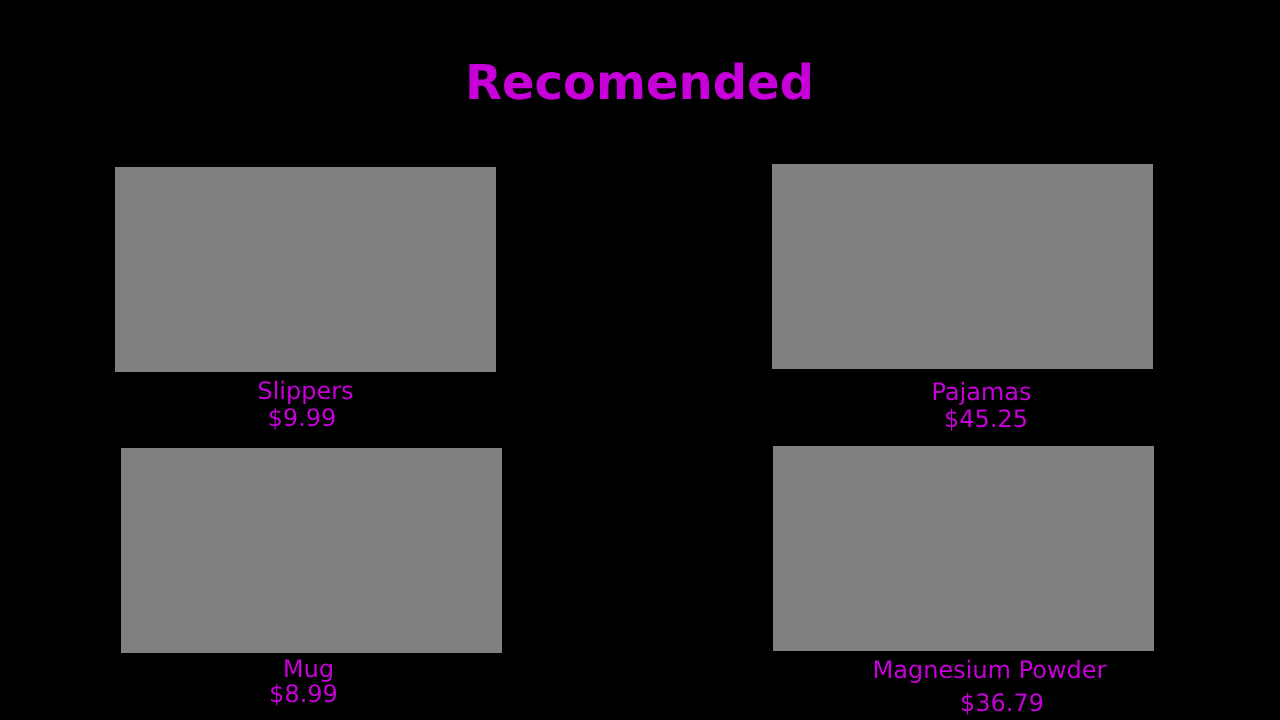
<style>
.page{position:relative;width:1280px;height:720px;background:#000000}
.page>*{position:absolute;margin:0}
.t1{font:48px "DejaVuSans-Bold";color:#c700d9}
.t2{font:24px "DejaVuSans";color:#c700d9}
</style>
<div class="page">
<p class="t1" style="left:469px;top:62px;width:341px;height:38px">Recomended</p>
<p class="t2" style="left:258px;top:380px;width:95px;height:24px">Slippers</p>
<p class="t2" style="left:933px;top:381px;width:98px;height:24px">Pajamas</p>
<p class="t2" style="left:269px;top:407px;width:66px;height:23px">$9.99</p>
<p class="t2" style="left:946px;top:408px;width:80px;height:23px">$45.25</p>
<p class="t2" style="left:285px;top:659px;width:47px;height:23px">Mug</p>
<p class="t2" style="left:874px;top:659px;width:233px;height:24px">Magnesium Powder</p>
<p class="t2" style="left:271px;top:683px;width:66px;height:23px">$8.99</p>
<p class="t2" style="left:962px;top:692px;width:81px;height:23px">$36.79</p>
</div>
